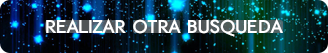
<style>
.page{position:relative;width:328px;height:53px}
.page>*{position:absolute;margin:0}
.t1{font:21.6px "ETH-Black";color:#ffffff}
</style>
<div class="page">
<p class="t1" style="left:46px;top:18px;width:237px;height:19px">REalizar otra busqueda</p>
</div>
